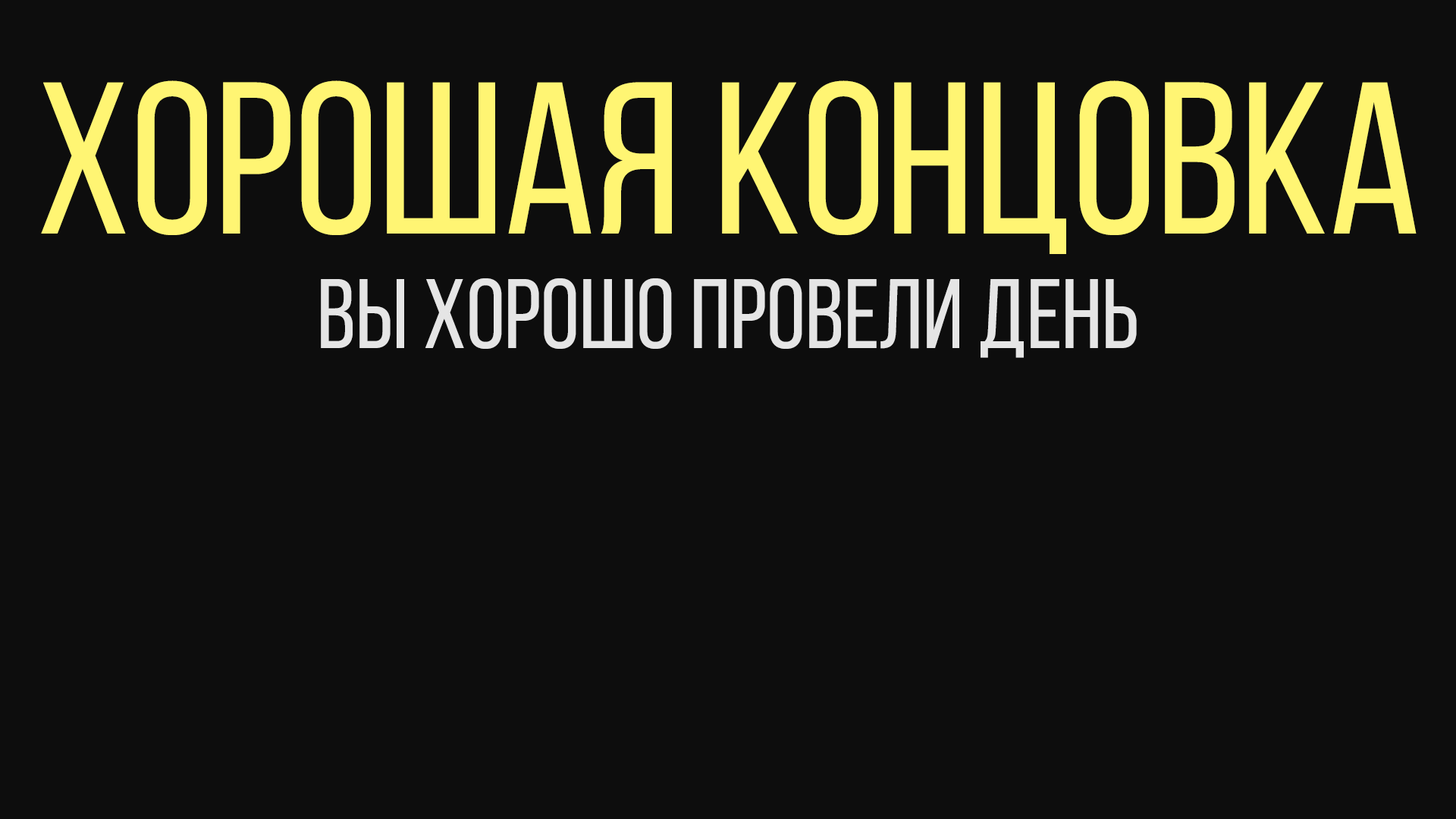
<style>
.page{position:relative;width:1456px;height:819px;background:#0d0d0d}
.page>*{position:absolute;margin:0}
.t1{font:215.9px "BebasNeueRegular";color:#fff573}
.t2{font:98.5px "BebasNeueRegular";color:#e6e6e6}
</style>
<div class="page">
<p class="t1" style="left:41px;top:80px;width:1376px;height:174px">хорошая концовка</p>
<p class="t2" style="left:321px;top:278px;width:816px;height:80px">вы хорошо провели день</p>
</div>
